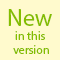
<style>
.page{position:relative;width:60px;height:60px;background:#fffacd}
.page>*{position:absolute;margin:0}
.t1{font:24px "MyriadPro-Regular";color:#84bd00}
.t2{font:12px "MyriadPro-Regular";color:#84bd00}
</style>
<div class="page">
<p class="t1" style="left:8px;top:9px;width:44px;height:17px">New</p>
<p class="t2" style="left:13px;top:31px;width:36px;height:23px;text-align:center">in this <br>version</p>
</div>
